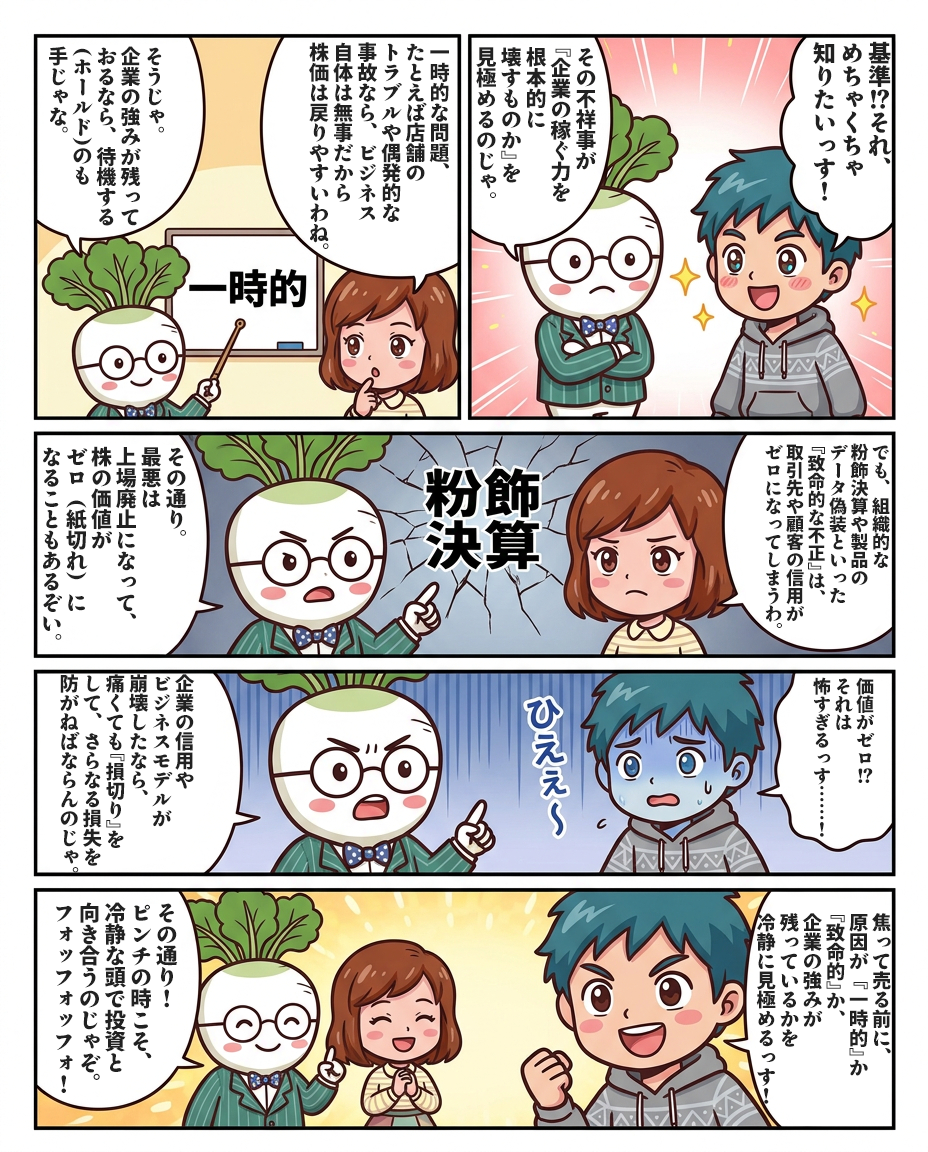
<style>
.page{position:relative;width:928px;height:1152px;background:#ffffff}
.page>*{position:absolute;margin:0}
.t1{font:23px "TenMinchoAntique-Heavy";color:#212121}
.t2{font:20.1px "TenMinchoAntique-Heavy";color:#212121}
.t3{font:20.7px "TenMinchoAntique-Heavy";color:#212121}
.t4{font:20.8px "TenMinchoAntique-Heavy";color:#212121}
.t5{font:17.9px "TenMinchoAntique-Heavy";color:#212121}
.t6{font:19.3px "TenMinchoAntique-Heavy";color:#212121}
.t7{font:21.4px "TenMinchoAntique-Heavy";color:#212121}
</style>
<div class="page">
<p class="t1" style="left:813px;top:41px;width:79px;height:160px">基準！？それ、<br>めちゃくちゃ<br>知りたいっす！</p>
<p class="t2" style="left:49px;top:46px;width:116px;height:180px">そうじゃ。<br>企業の強みが残って<br>おるなら、待機する<br>（ホールド）のも<br>手じゃな。</p>
<p class="t2" style="left:309px;top:42px;width:141px;height:207px">一時的な問題、<br>たとえば店舗の<br>トラブルや偶発的な<br>事故なら、ビジネス<br>自体は無事だから<br>株価は戻りやすいわね。</p>
<p class="t3" style="left:476px;top:47px;width:121px;height:155px">その不祥事が<br>『企業の稼ぐ力を<br>根本的に<br>壊すものか』を<br>見極めるのじゃ。</p>
<p class="t4" style="left:43px;top:446px;width:144px;height:194px">その通り。<br>最悪は<br>上場廃止になって、<br>株の価値が<br>ゼロ（紙切れ）に<br>なることもあるぞい。</p>
<p class="t5" style="left:765px;top:443px;width:125px;height:185px">でも、組織的な<br>粉飾決算や製品の<br>データ偽装といった<br>『致命的な不正』は、<br>取引先や顧客の信用が<br>ゼロになってしまうわ。</p>
<p class="t6" style="left:60px;top:674px;width:135px;height:199px">企業の信用や<br>ビジネスモデルが<br>崩壊したなら、<br>痛くても『損切り』を<br>して、さらなる損失を<br>防がねばならんのじゃ。</p>
<p class="t5" style="left:813px;top:677px;width:62px;height:160px">価値がゼロ！？<br>それは<br>怖すぎるっす……！</p>
<p class="t7" style="left:56px;top:902px;width:122px;height:191px">その通り！<br>ピンチの時こそ、<br>冷静な頭で投資と<br>向き合うのじゃぞ。<br>フォッフォッフォ！</p>
<p class="t6" style="left:756px;top:913px;width:135px;height:191px">焦って売る前に、<br>原因が『一時的』か<br>『致命的』か、<br>企業の強みが<br>残っているかを<br>冷静に見極めるっす！</p>
</div>
